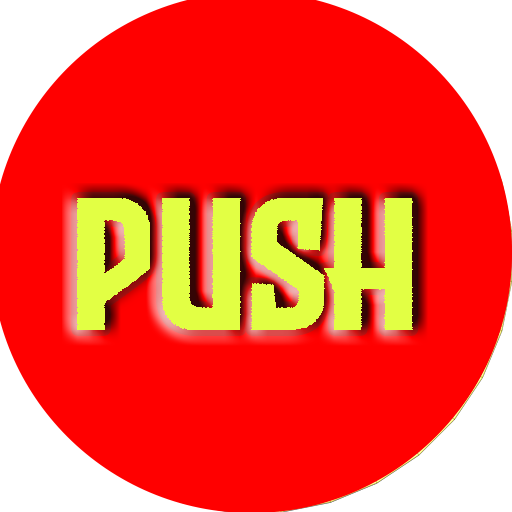
<style>
.page{position:relative;width:512px;height:512px;background:#ff0000}
.page>*{position:absolute;margin:0}
.t1{font:188.4px "EvilEmpire";color:#e2ff44}
</style>
<div class="page">
<p class="t1" style="left:77px;top:198px;width:336px;height:132px">PUSH</p>
</div>
